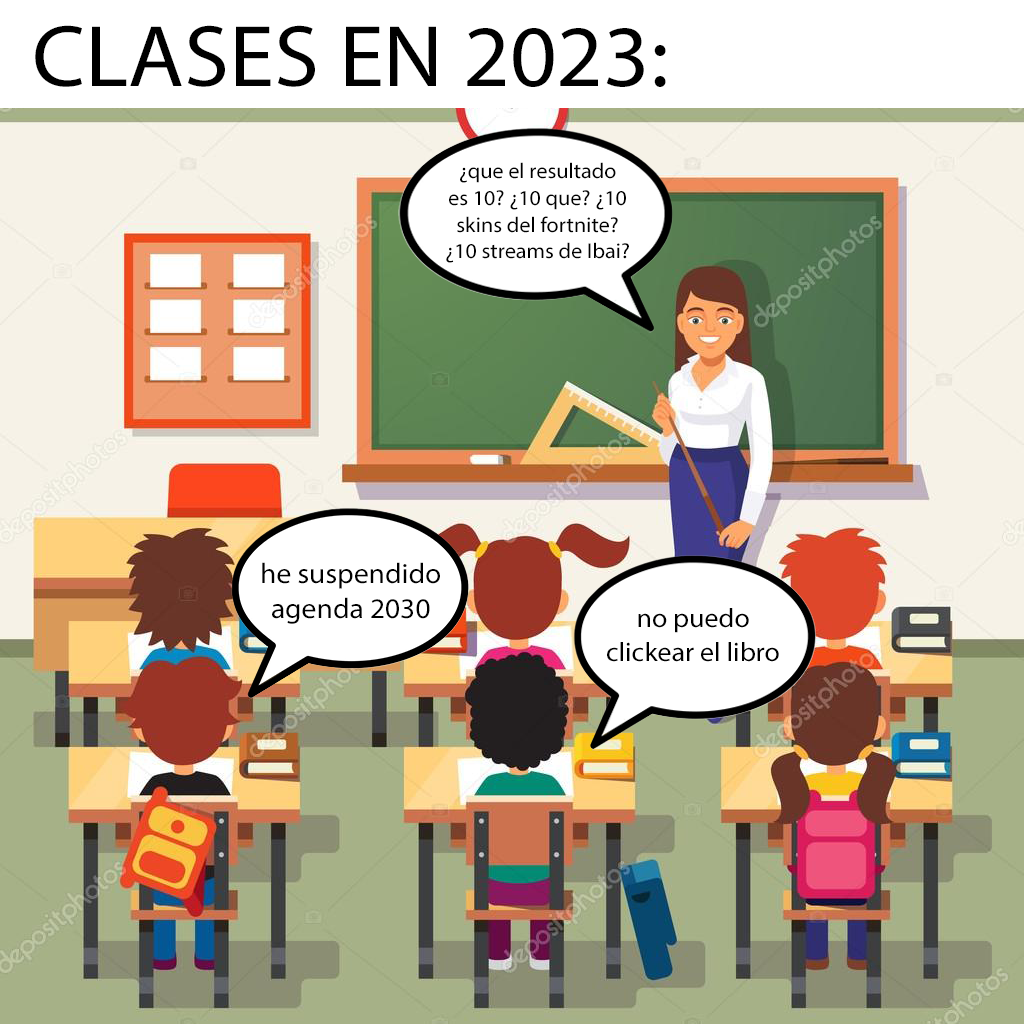
<style>
.page{position:relative;width:1024px;height:1024px}
.page>*{position:absolute;margin:0}
.t1{font:87.8px "MyriadPro-Regular";color:#000000;scale:1.04 1}
.t2{font:21.3px "MyriadPro-Regular";color:#000000;scale:1.04 1}
.t3{font:28.4px "MyriadPro-Regular";color:#000000;scale:1.04 1}
.t4{font:26.9px "MyriadPro-Regular";color:#000000;scale:1.04 1}
</style>
<div class="page">
<p class="t1" style="left:35px;top:25px;width:631px;height:62px">CLASES EN 2023:</p>
<p class="t2" style="left:446px;top:162px;width:183px;height:101px;text-align:center">¿que el resultado<br>es 10? ¿10 que? ¿10<br>skins del fortnite?<br>¿10 streams de Ibai?</p>
<p class="t3" style="left:262px;top:562px;width:178px;height:62px;text-align:center">he suspendido<br>agenda 2030</p>
<p class="t4" style="left:607px;top:608px;width:172px;height:54px;text-align:center">no puedo<br>clickear el libro</p>
</div>
